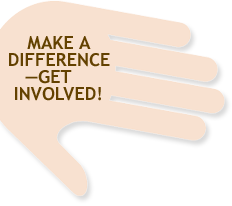
<style>
.page{position:relative;width:232px;height:206px;background:#f8e1d0}
.page>*{position:absolute;margin:0}
.t1{font:18px/17px "TrebuchetMS-Bold";color:#634100}
</style>
<div class="page">
<p class="t1" style="left:9px;top:36px;width:101px;height:65px;text-align:center">MAKE A<br>DIFFERENCE<br>—GET    <br>INVOLVED!</p>
</div>
